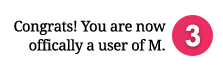
<style>
.page{position:relative;width:223px;height:69px;background:#ffffff}
.page>*{position:absolute;margin:0}
.t1{font:14.6px "DroidSerif";letter-spacing:-0.02em;color:#000000}
.t2{font:29.5px "Arial-BoldMT";letter-spacing:-0.02em;color:#ffffff}
</style>
<div class="page">
<p class="t1" style="left:14px;top:20px;width:152px;height:15px">Congrats! You are now</p>
<p class="t2" style="left:185px;top:24px;width:15px;height:23px">3</p>
<p class="t1" style="left:29px;top:39px;width:136px;height:15px">offically a user of M.</p>
</div>
